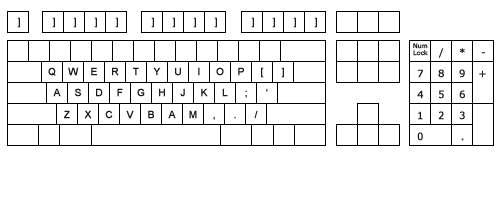
<style>
.page{position:relative;width:500px;height:200px;background:#ffffff}
.page>*{position:absolute;margin:0}
.t1{font:10px "ArialMT";letter-spacing:0.04em;color:#1c1c1c;font-weight:bold}
.t2{font:6px/7px "Verdana";letter-spacing:0.04em;color:#1c1c1c}
.t3{font:10px "Verdana";letter-spacing:0.04em;color:#1c1c1c;font-weight:bold}
.t4{font:10px "Verdana";letter-spacing:0.04em;font-weight:bold}
.t5{font:10px "ArialMT";letter-spacing:0.04em;font-weight:bold}
</style>
<div class="page">
<p class="t1" style="left:17px;top:17px;width:3px;height:11px">]</p>
<p class="t1" style="left:52px;top:17px;width:3px;height:11px">]</p>
<p class="t1" style="left:73px;top:17px;width:3px;height:11px">]</p>
<p class="t1" style="left:94px;top:17px;width:3px;height:11px">]</p>
<p class="t1" style="left:115px;top:17px;width:3px;height:11px">]</p>
<p class="t1" style="left:151px;top:17px;width:3px;height:11px">]</p>
<p class="t1" style="left:172px;top:17px;width:3px;height:11px">]</p>
<p class="t1" style="left:193px;top:17px;width:3px;height:11px">]</p>
<p class="t1" style="left:214px;top:17px;width:3px;height:11px">]</p>
<p class="t1" style="left:251px;top:17px;width:3px;height:11px">]</p>
<p class="t1" style="left:272px;top:17px;width:3px;height:11px">]</p>
<p class="t1" style="left:293px;top:17px;width:3px;height:11px">]</p>
<p class="t1" style="left:314px;top:17px;width:3px;height:11px">]</p>
<p class="t2" style="left:413px;top:43px;width:15px;height:13px;text-align:center">Num<br>Lock</p>
<p class="t3" style="left:438px;top:48px;width:6px;height:10px">/</p>
<p class="t3" style="left:459px;top:48px;width:6px;height:5px">*</p>
<p class="t4" style="left:481px;top:52px;width:4px;height:2px">-</p>
<p class="t1" style="left:48px;top:67px;width:8px;height:9px">Q</p>
<p class="t1" style="left:68px;top:67px;width:11px;height:9px">W</p>
<p class="t1" style="left:91px;top:67px;width:6px;height:9px">E</p>
<p class="t1" style="left:112px;top:67px;width:7px;height:9px">R</p>
<p class="t1" style="left:133px;top:67px;width:6px;height:9px">T</p>
<p class="t1" style="left:153px;top:67px;width:8px;height:9px">Y</p>
<p class="t1" style="left:175px;top:67px;width:6px;height:9px">U</p>
<p class="t5" style="left:198px;top:67px;width:2px;height:9px">I</p>
<p class="t1" style="left:216px;top:67px;width:8px;height:9px">O</p>
<p class="t1" style="left:238px;top:67px;width:6px;height:9px">P</p>
<p class="t1" style="left:261px;top:67px;width:3px;height:11px">[</p>
<p class="t1" style="left:281px;top:67px;width:3px;height:11px">]</p>
<p class="t3" style="left:417px;top:69px;width:6px;height:9px">7</p>
<p class="t3" style="left:438px;top:69px;width:6px;height:9px">8</p>
<p class="t3" style="left:459px;top:69px;width:6px;height:9px">9</p>
<p class="t3" style="left:479px;top:70px;width:7px;height:8px">+</p>
<p class="t1" style="left:53px;top:88px;width:8px;height:9px">A</p>
<p class="t1" style="left:75px;top:88px;width:6px;height:9px">S</p>
<p class="t1" style="left:96px;top:88px;width:7px;height:9px">D</p>
<p class="t1" style="left:117px;top:88px;width:6px;height:9px">F</p>
<p class="t1" style="left:137px;top:88px;width:8px;height:9px">G</p>
<p class="t1" style="left:159px;top:88px;width:6px;height:9px">H</p>
<p class="t1" style="left:180px;top:88px;width:5px;height:9px">J</p>
<p class="t1" style="left:201px;top:88px;width:7px;height:9px">K</p>
<p class="t1" style="left:222px;top:88px;width:6px;height:9px">L</p>
<p class="t5" style="left:266px;top:88px;width:2px;height:4px">‘</p>
<p class="t5" style="left:245px;top:90px;width:2px;height:8px">;</p>
<p class="t3" style="left:417px;top:90px;width:7px;height:9px">4</p>
<p class="t4" style="left:439px;top:90px;width:5px;height:9px">5</p>
<p class="t3" style="left:459px;top:90px;width:6px;height:9px">6</p>
<p class="t1" style="left:64px;top:110px;width:6px;height:9px">Z</p>
<p class="t1" style="left:84px;top:110px;width:8px;height:9px">X</p>
<p class="t1" style="left:105px;top:110px;width:8px;height:9px">C</p>
<p class="t1" style="left:126px;top:110px;width:8px;height:9px">V</p>
<p class="t1" style="left:148px;top:110px;width:6px;height:9px">B</p>
<p class="t1" style="left:168px;top:110px;width:8px;height:9px">A</p>
<p class="t1" style="left:189px;top:110px;width:8px;height:9px">M</p>
<p class="t1" style="left:254px;top:110px;width:4px;height:9px">/</p>
<p class="t3" style="left:418px;top:111px;width:5px;height:9px">1</p>
<p class="t3" style="left:438px;top:111px;width:6px;height:9px">2</p>
<p class="t3" style="left:459px;top:111px;width:6px;height:9px">3</p>
<p class="t5" style="left:213px;top:117px;width:2px;height:3px">,</p>
<p class="t5" style="left:234px;top:117px;width:2px;height:2px">.</p>
<p class="t3" style="left:417px;top:132px;width:6px;height:9px">0</p>
<p class="t3" style="left:461px;top:138px;width:3px;height:3px">.</p>
</div>
